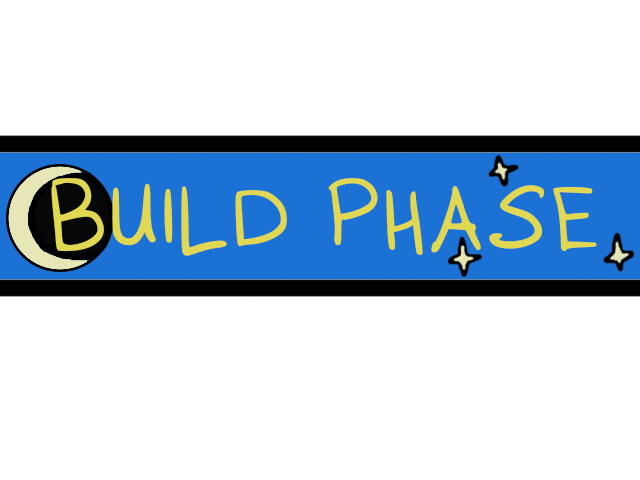
<style>
.page{position:relative;width:640px;height:480px;background:#ffffff}
.page>*{position:absolute;margin:0}
.t1{font:150px "xiascript_2015430";color:#e0d853}
</style>
<div class="page">
<p class="t1" style="left:51px;top:178px;width:546px;height:78px">BUILD PHASE</p>
</div>
